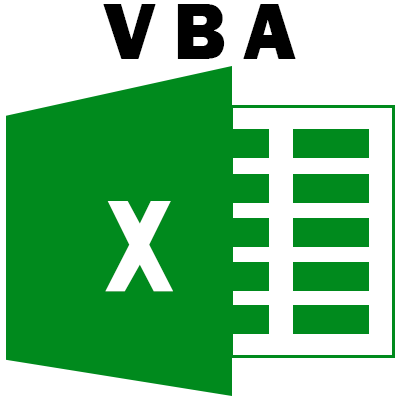
<style>
.page{position:relative;width:400px;height:400px;background:#ffffff}
.page>*{position:absolute;margin:0}
.t1{font:83.3px "FranklinGothic-Heavy";letter-spacing:0.2em;color:#000000}
.t2{font:149.5px "HGPSoeiKakugothicUB";letter-spacing:0.07em;color:#ffffff}
</style>
<div class="page">
<p class="t1" style="left:103px;top:4px;width:193px;height:55px">VBA</p>
<p class="t2" style="left:105px;top:201px;width:69px;height:91px">x</p>
</div>
